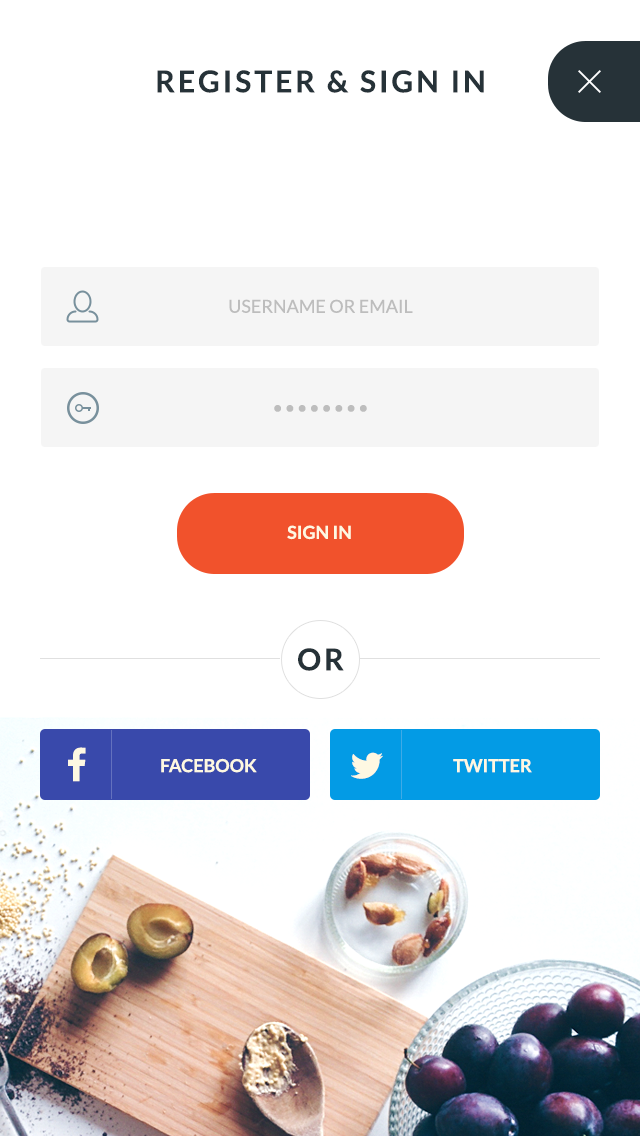
<style>
.page{position:relative;width:640px;height:1136px;background:#ffffff}
.page>*{position:absolute;margin:0}
.t1{font:30px "Lato-Bold";letter-spacing:0.1em;color:#263238;text-transform:uppercase}
.t2{font:18px/30px "Lato-Regular";color:#bdbdbd;text-transform:uppercase}
.t3{font:24px/30px "Lato-Regular";color:#bdbdbd}
.t4{font:18px/30px "Lato-Regular";letter-spacing:0.1em;color:#bdbdbd;text-transform:uppercase}
.t5{font:24px/30px "Lato-Regular";letter-spacing:0.1em;color:#bdbdbd}
.t6{font:18px "Lato-Bold";color:#fef8e2;text-transform:uppercase}
</style>
<div class="page">
<p class="t1" style="left:157px;top:70px;width:327px;height:23px">Register &amp; Sign in</p>
<p class="t2" style="left:229px;top:299px;width:184px;height:14px;text-align:center">username or email<br><span class="t3">,</span></p>
<p class="t4" style="left:274px;top:405px;width:93px;height:7px;text-align:center">••••••••<br><span class="t5">,</span></p>
<p class="t6" style="left:287px;top:525px;width:64px;height:15px">sign in</p>
<p class="t1" style="left:298px;top:648px;width:46px;height:23px">or</p>
<p class="t6" style="left:161px;top:758px;width:96px;height:15px">Facebook</p>
<p class="t6" style="left:453px;top:759px;width:79px;height:14px">Twitter</p>
</div>
